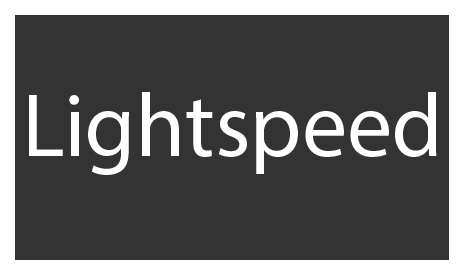
<style>
.page{position:relative;width:464px;height:276px;background:#333333}
.page>*{position:absolute;margin:0}
.t1{font:90px "MyriadPro-Regular";color:#ffffff}
</style>
<div class="page">
<p class="t1" style="left:29px;top:92px;width:408px;height:83px">Lightspeed</p>
</div>
